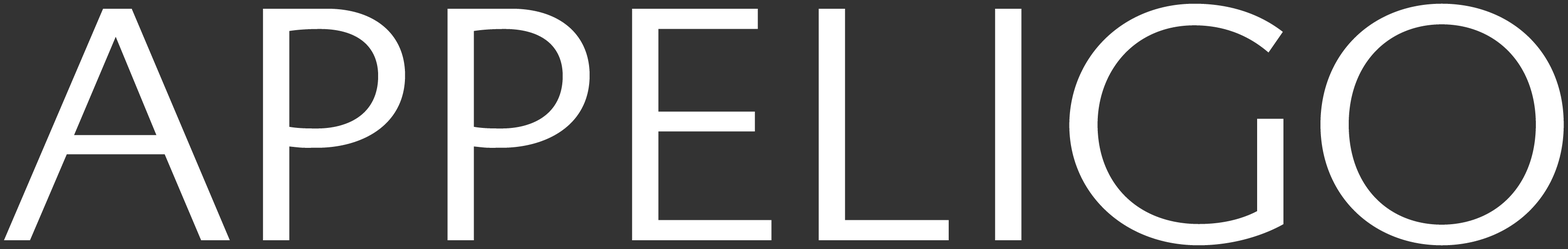
<style>
.page{position:relative;width:1568px;height:249px;background:#333333}
.page>*{position:absolute;margin:0}
.t1{font:331.3px "Gibbs-Book";color:#ffffff}
</style>
<div class="page">
<p class="t1" style="left:4px;top:3px;width:1560px;height:243px">APPELIGO</p>
</div>
